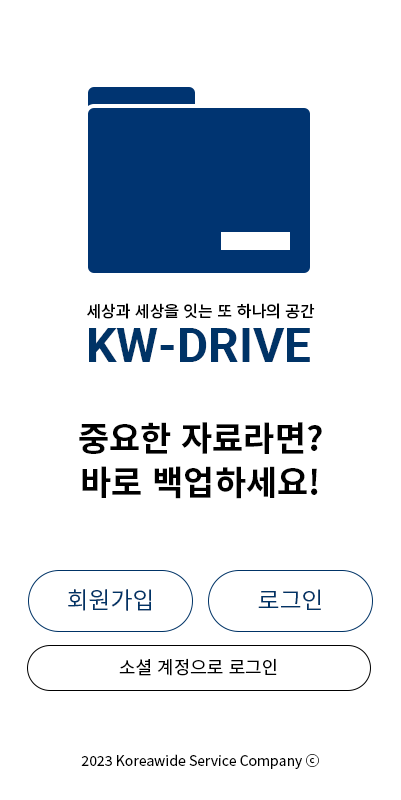
<style>
.page{position:relative;width:401px;height:800px;background:#ffffff}
.page>*{position:absolute;margin:0}
.t1{font:16px "NotoSansKR-Medium";color:#000000}
.t2{font:48px "Roboto-Bold";color:#003366}
.t3{font:34px/44px "NotoSansKR-Bold";color:#000000}
.t4{font:24px "NotoSansKR-Regular";color:#003366}
.t5{font:18px "NotoSansKR-Regular";color:#000000}
.t6{font:14px "NotoSansKR-Regular";color:#000000}
</style>
<div class="page">
<p class="t1" style="left:87px;top:303px;width:228px;height:16px">세상과 세상을 잇는 또 하나의 공간</p>
<p class="t2" style="left:89px;top:328px;width:221px;height:34px">KW-DRIVE</p>
<p class="t3" style="left:79px;top:422px;width:243px;height:77px;text-align:center">중요한 자료라면?<br>바로 백업하세요!</p>
<p class="t4" style="left:68px;top:589px;width:83px;height:22px">회원가입</p>
<p class="t4" style="left:258px;top:589px;width:63px;height:21px">로그인</p>
<p class="t5" style="left:119px;top:658px;width:158px;height:18px">소셜 계정으로 로그인</p>
<p class="t6" style="left:81px;top:754px;width:238px;height:15px">2023 Koreawide Service Company ⓒ</p>
</div>
